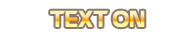
<style>
.page{position:relative;width:194px;height:34px;background:#ffffff}
.page>*{position:absolute;margin:0}
.t1{font:22.6px "UTM-Eremitage"}
</style>
<div class="page">
<p class="t1" style="left:50px;top:10px;width:95px;height:18px">TEXT ON</p>
</div>
